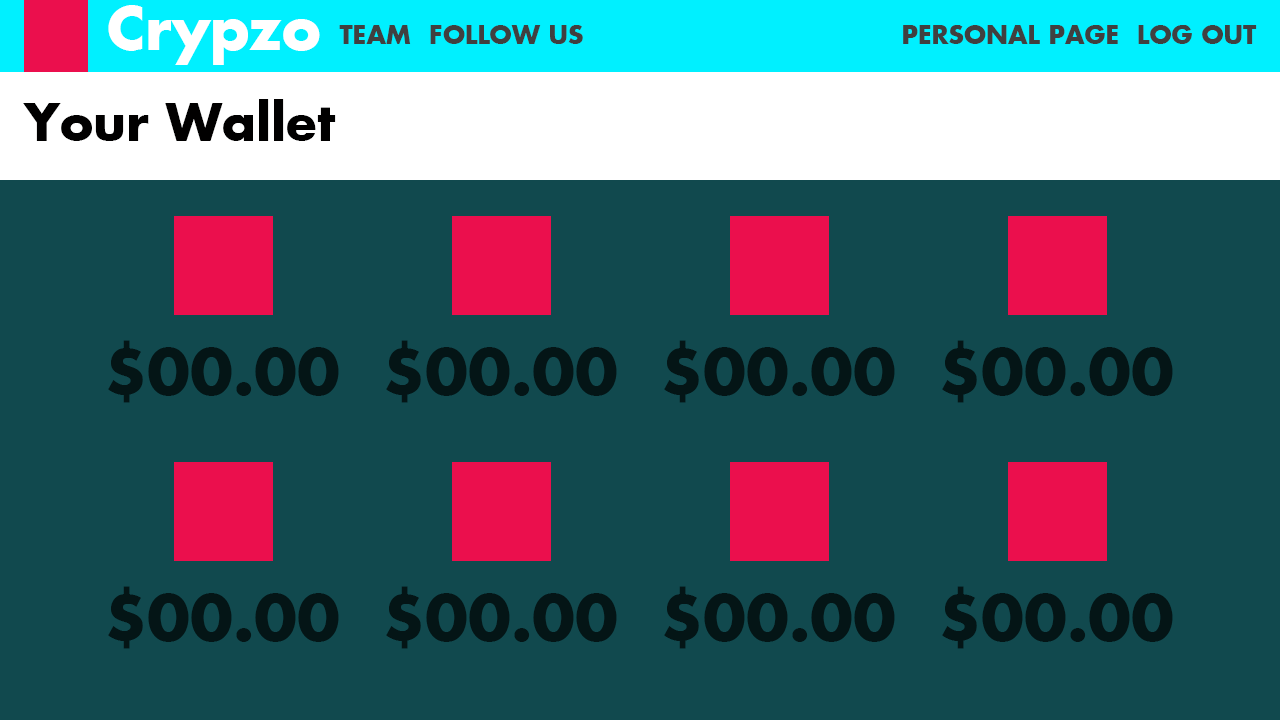
<style>
.page{position:relative;width:1280px;height:720px;background:#11494e}
.page>*{position:absolute;margin:0}
.t1{font:58.3px "FuturaKoyu";color:#ffffff}
.t2{font:25px "FuturaKoyu";color:#404040}
.t3{font:25.4px "FuturaKoyu";color:#404040}
.t4{font:50px "FuturaKoyu";color:#010000}
.t5{font:62.1px "FuturaKoyu";color:#041516}
</style>
<div class="page">
<p class="t1" style="left:108px;top:5px;width:212px;height:60px">Crypzo</p>
<p class="t2" style="left:339px;top:25px;width:72px;height:19px">TEAM</p>
<p class="t3" style="left:430px;top:25px;width:153px;height:19px">FOLLOW US</p>
<p class="t3" style="left:903px;top:25px;width:215px;height:19px">PERSONAL PAGE</p>
<p class="t3" style="left:1138px;top:25px;width:119px;height:19px">LOG OUT</p>
<p class="t4" style="left:23px;top:99px;width:313px;height:42px">Your Wallet</p>
<p class="t5" style="left:108px;top:340px;width:231px;height:63px">$00.00</p>
<p class="t5" style="left:386px;top:340px;width:231px;height:63px">$00.00</p>
<p class="t5" style="left:664px;top:340px;width:231px;height:63px">$00.00</p>
<p class="t5" style="left:942px;top:340px;width:231px;height:63px">$00.00</p>
<p class="t5" style="left:108px;top:586px;width:231px;height:63px">$00.00</p>
<p class="t5" style="left:386px;top:586px;width:231px;height:63px">$00.00</p>
<p class="t5" style="left:664px;top:586px;width:231px;height:63px">$00.00</p>
<p class="t5" style="left:942px;top:586px;width:231px;height:63px">$00.00</p>
</div>
